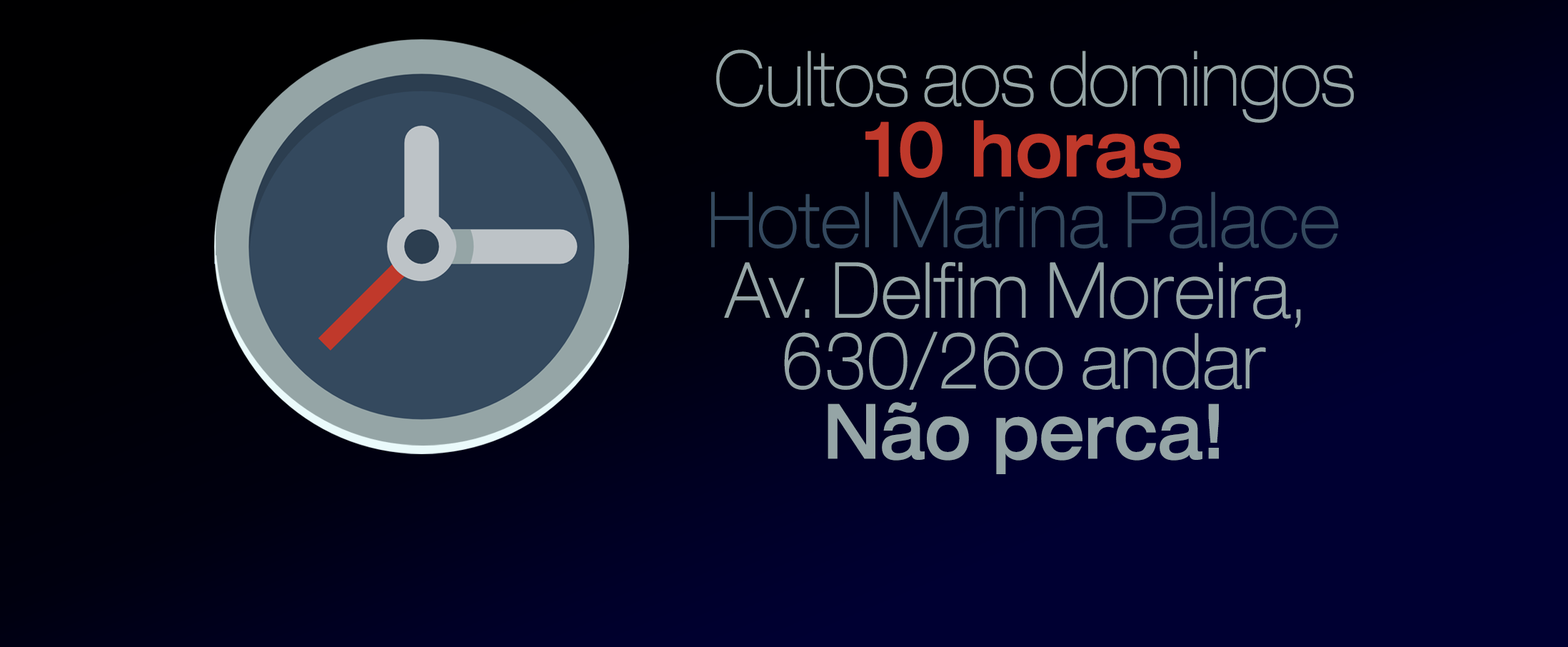
<style>
.page{position:relative;width:1568px;height:647px}
.page>*{position:absolute;margin:0}
.t1{font:76.5px "Helvetica33-ExtendedThin";color:#95a5a6;font-weight:bold;scale:0.83 1}
.t2{font:76.5px "Helvetica-Black";color:#e3e3e3;scale:0.83 1}
.t3{font:76.5px "Helvetica33-ExtendedThin";color:#95a5a6;scale:0.83 1}
.t4{font:76.5px "Helvetica63-ExtendedMedium";color:#c0392b;font-weight:bold;scale:0.83 1}
.t5{font:76.5px "Helvetica33-ExtendedThin";color:#34495e;font-weight:bold;scale:0.83 1}
.t6{font:76.5px "Helvetica63-ExtendedMedium";color:#95a5a6;scale:0.83 1}
</style>
<div class="page">
<p class="t1" style="left:711px;top:49px;width:643px;height:425px;text-align:center"><span class="t2"> </span><span class="t3">Cultos aos domingos<br></span><span class="t4">10 horas<br></span><span class="t5">Hotel Marina Palace<br></span>Av. Delfim Moreira, <br>630/26o andar<br><span class="t6">Não perca!</span></p>
</div>
